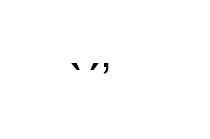
<style>
.page{position:relative;width:210px;height:139px;background:#ffffff}
.page>*{position:absolute;margin:0}
.t1{font:48px "ArialMT";color:#000000}
</style>
<div class="page">
<p class="t1" style="left:71px;top:63px;width:38px;height:11px">`´’</p>
</div>
